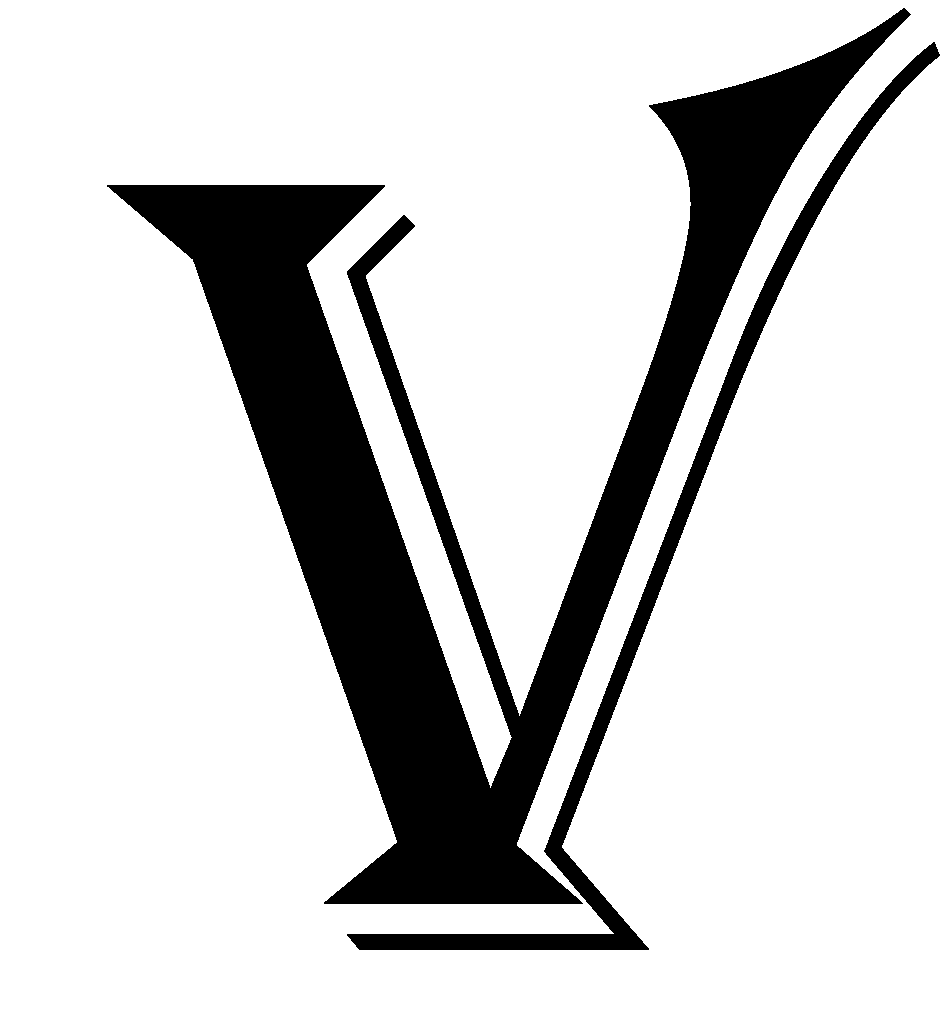
<style>
.page{position:relative;width:952px;height:1024px;background:#ffffff}
.page>*{position:absolute;margin:0}
.t1{font:1146.4px "Algerian";color:#000000}
</style>
<div class="page">
<p class="t1" style="left:107px;top:8px;width:833px;height:942px">V</p>
</div>
